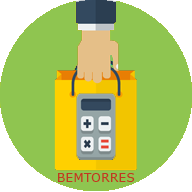
<style>
.page{position:relative;width:192px;height:192px;background:#8fc550}
.page>*{position:absolute;margin:0}
.t1{font:12.1px "MSReferenceSansSerif";color:#c13920;scale:1.03 1}
</style>
<div class="page">
<p class="t1" style="left:58px;top:173px;width:77px;height:9px">BEMTORRES</p>
</div>
